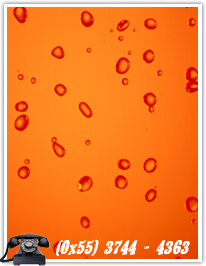
<style>
.page{position:relative;width:206px;height:266px}
.page>*{position:absolute;margin:0}
.t1{font:16px "CairoExtendedItalic";color:#ffffff}
</style>
<div class="page">
<p class="t1" style="left:56px;top:239px;width:134px;height:17px">(0x55) 3744 - 4363</p>
</div>
